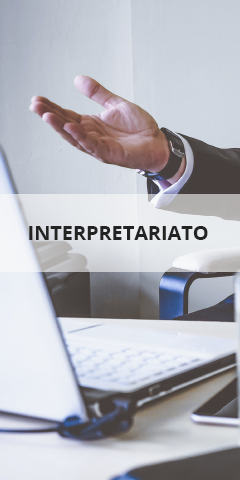
<style>
.page{position:relative;width:240px;height:480px}
.page>*{position:absolute;margin:0}
.t1{font:20px "OpenSans-Bold";letter-spacing:-0.005em;color:#242323;text-transform:uppercase}
</style>
<div class="page">
<p class="t1" style="left:29px;top:226px;width:179px;height:14px">Interpretariato</p>
</div>
